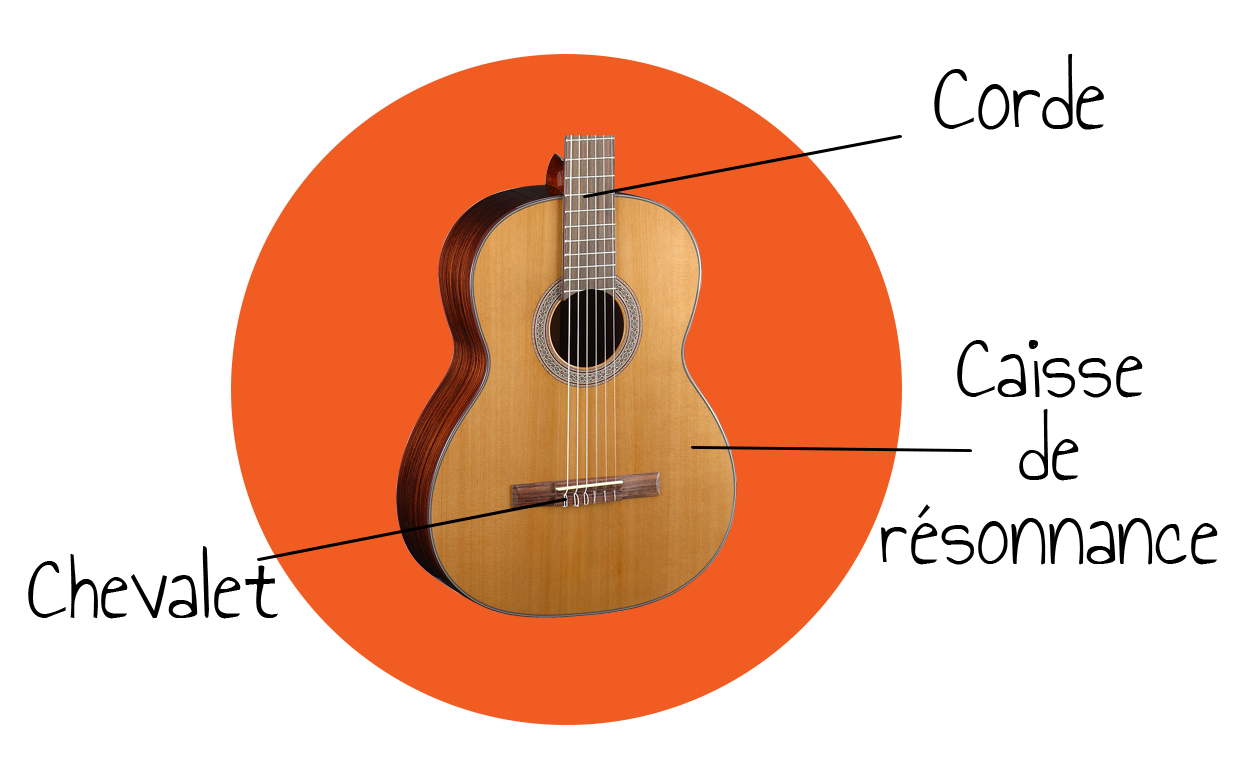
<style>
.page{position:relative;width:1235px;height:778px;background:#ffffff}
.page>*{position:absolute;margin:0}
.t1{font:75px "AnnieUseYourTelescope";color:#000000}
.t2{font:70.8px/83.3px "AnnieUseYourTelescope";color:#000000}
.t3{font:70.8px "AnnieUseYourTelescope";color:#000000}
</style>
<div class="page">
<p class="t1" style="left:934px;top:53px;width:170px;height:77px">Corde</p>
<p class="t2" style="left:881px;top:340px;width:337px;height:225px;text-align:center">Caisse<br>de<br>résonnance</p>
<p class="t3" style="left:28px;top:546px;width:250px;height:73px">Chevalet</p>
</div>
